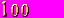
<style>
.page{position:relative;width:64px;height:18px;background:#ff00ff}
.page>*{position:absolute;margin:0}
.t1{font:15.2px "VNI-Hobo";scale:1.03 1}
.t2{font:18.2px "VNI-Hobo";scale:1.03 1}
</style>
<div class="page">
<p class="t1" style="left:2px;top:1px;width:27px;height:16px"><span class="t2">1</span>00</p>
</div>
